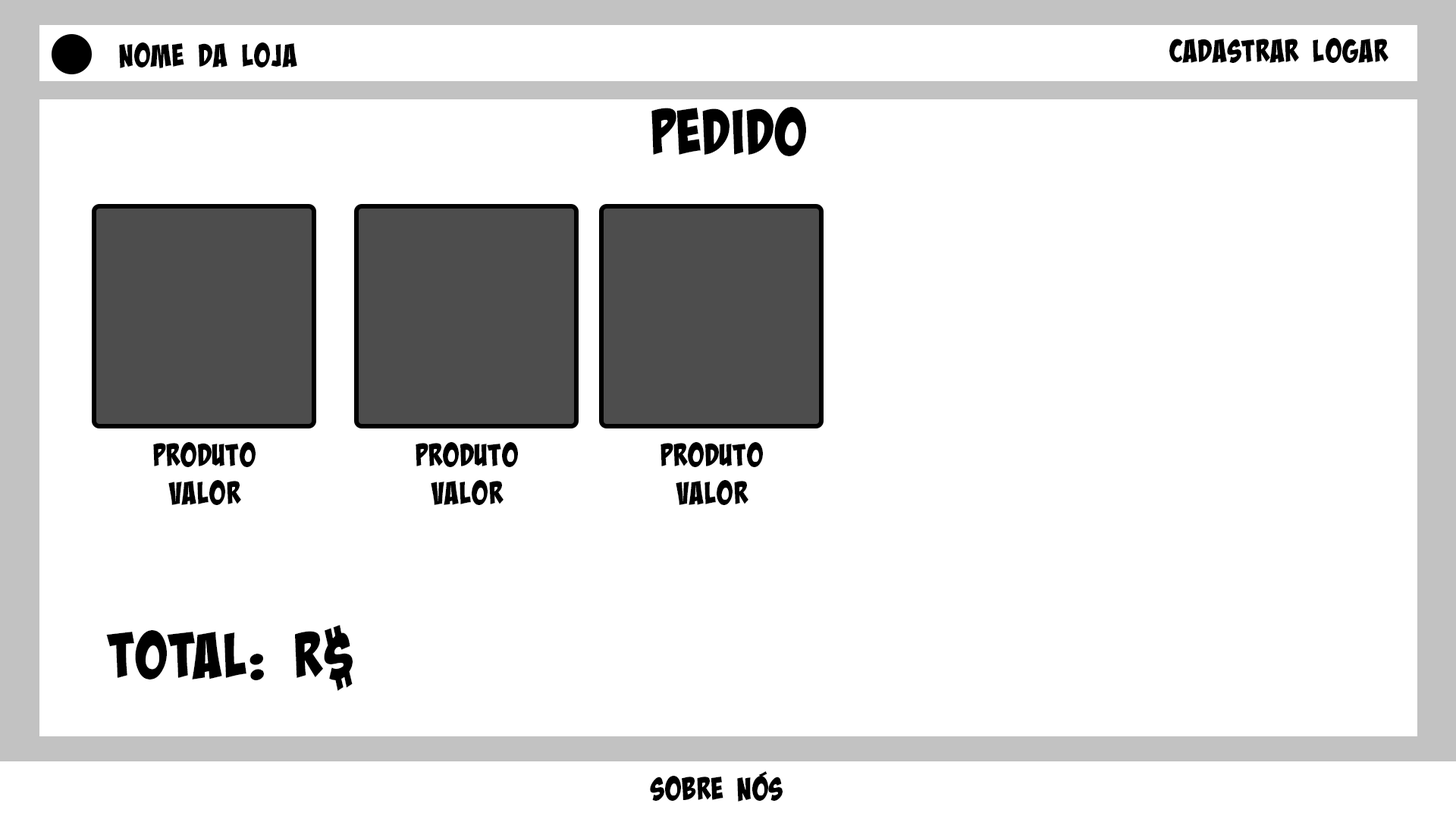
<style>
.page{position:relative;width:1456px;height:819px;background:#ffffff}
.page>*{position:absolute;margin:0}
.t1{font:31.6px "BadaBoomProBB";color:#000000}
.t2{font:63.2px "BadaBoomProBB";color:#000000}
</style>
<div class="page">
<p class="t1" style="left:1169px;top:38px;width:219px;height:25px">Cadastrar Logar</p>
<p class="t1" style="left:119px;top:42px;width:178px;height:26px">NOME DA LOJA</p>
<p class="t2" style="left:651px;top:107px;width:155px;height:49px">Pedido</p>
<p class="t1" style="left:153px;top:442px;width:103px;height:63px;text-align:center">Produto<br>Valor</p>
<p class="t1" style="left:416px;top:442px;width:102px;height:63px;text-align:center">Produto<br>Valor</p>
<p class="t1" style="left:660px;top:442px;width:103px;height:63px;text-align:center">Produto<br>Valor</p>
<p class="t2" style="left:106px;top:625px;width:247px;height:66px">Total: R$</p>
<p class="t1" style="left:650px;top:771px;width:133px;height:31px">Sobre nós</p>
</div>
